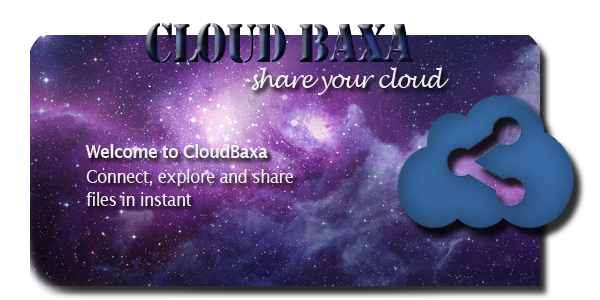
<style>
.page{position:relative;width:600px;height:300px}
.page>*{position:absolute;margin:0}
.t1{font:50.2px "StencilStd";letter-spacing:-0.04em;scale:0.86 1}
.t2{font:23.8px "LucidaHandwriting-Italic";letter-spacing:-0.04em;color:#eeeeee;scale:0.91 1}
.t3{font:18.5px "LucidaSans-Demi";letter-spacing:-0.04em;color:#fefefe;scale:0.91 1}
.t4{font:18.5px/23.3px "LucidaSans";letter-spacing:-0.04em;color:#ffffff;scale:0.91 1}
</style>
<div class="page">
<p class="t1" style="left:146px;top:23px;width:268px;height:40px">CLOUD BAXA</p>
<p class="t2" style="left:245px;top:67px;width:204px;height:28px">-share your cloud</p>
<p class="t3" style="left:85px;top:144px;width:183px;height:14px">Welcome to CloudBaxa</p>
<p class="t4" style="left:86px;top:169px;width:207px;height:37px">Connect, explore and share<br>files in instant</p>
</div>
